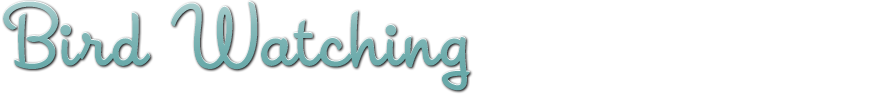
<style>
.page{position:relative;width:876px;height:112px;background:#ffffff}
.page>*{position:absolute;margin:0}
.t1{font:82px "Housearama-LeagueNight";color:#77b1b1}
</style>
<div class="page">
<p class="t1" style="left:3px;top:0px;width:467px;height:91px">Bird Watching</p>
</div>
